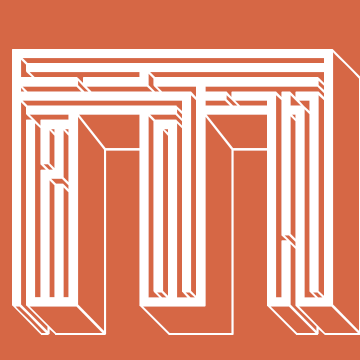
<style>
.page{position:relative;width:360px;height:360px;background:#d66745}
.page>*{position:absolute;margin:0}
.t1{font:500px "Maze-Bold";color:#ffffff}
</style>
<div class="page">
<p class="t1" style="left:12px;top:49px;width:349px;height:286px">M</p>
</div>
